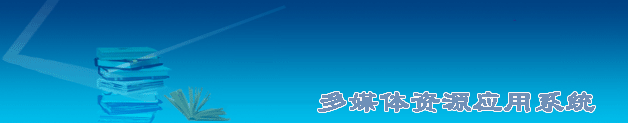
<style>
.page{position:relative;width:628px;height:123px}
.page>*{position:absolute;margin:0}
.t1{font:30px "LiSu";color:#6f90b8;font-weight:bold}
</style>
<div class="page">
<p class="t1" style="left:318px;top:92px;width:277px;height:20px">多媒体资源应用系统</p>
</div>
